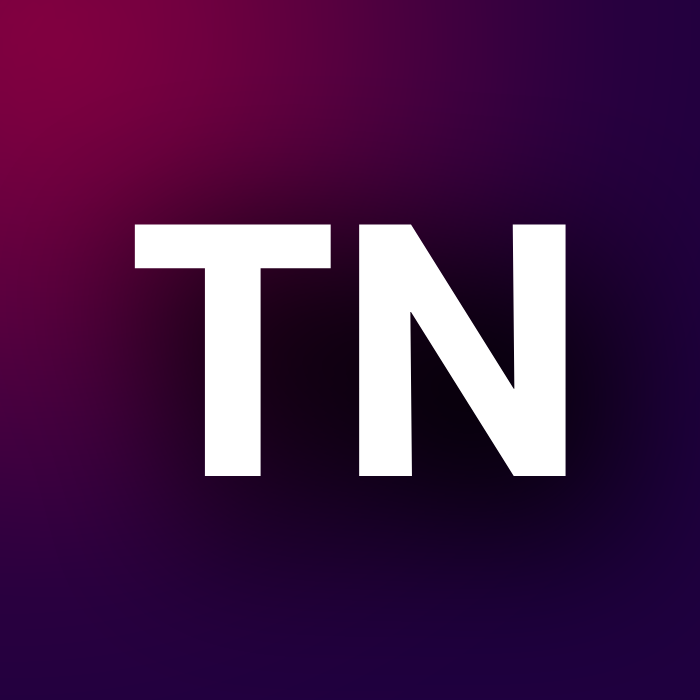
<style>
.page{position:relative;width:700px;height:700px}
.page>*{position:absolute;margin:0}
.t1{font:326.5px "BwNistaGroteskDEMO-ExtraBold";color:#ffffff}
</style>
<div class="page">
<p class="t1" style="left:134px;top:224px;width:432px;height:252px">TN</p>
</div>
